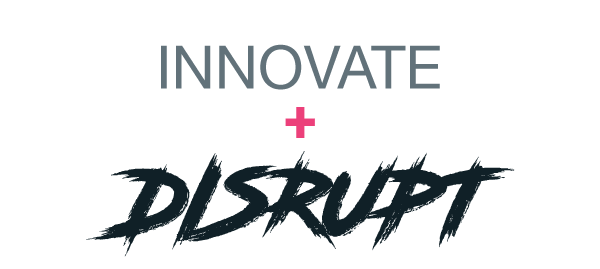
<style>
.page{position:relative;width:600px;height:269px;background:#ffffff}
.page>*{position:absolute;margin:0}
.t1{font:60px "HelveticaNeue";color:#62727a}
.t2{font:60px "Roboto-Bold";color:#ec407a}
.t3{font:90px "RoadRage";color:#102027}
</style>
<div class="page">
<p class="t1" style="left:161px;top:44px;width:279px;height:46px">INNOVATE</p>
<p class="t2" style="left:285px;top:107px;width:30px;height:31px">+</p>
<p class="t3" style="left:86px;top:151px;width:429px;height:106px">DISRUPT</p>
</div>
